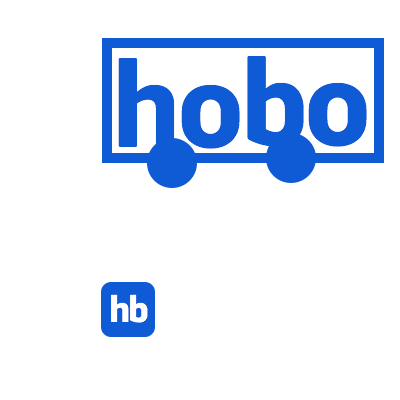
<style>
.page{position:relative;width:400px;height:400px;background:#ffffff}
.page>*{position:absolute;margin:0}
.t1{font:120px "Webnar-Bold";color:#0f5ad5}
.t2{font:36.1px "Webnar-Bold";color:#ffffff}
</style>
<div class="page">
<p class="t1" style="left:118px;top:58px;width:57px;height:89px">h</p>
<p class="t1" style="left:247px;top:56px;width:57px;height:91px">b</p>
<p class="t1" style="left:181px;top:84px;width:59px;height:65px">o</p>
<p class="t1" style="left:308px;top:82px;width:59px;height:65px">o</p>
<p class="t2" style="left:111px;top:294px;width:37px;height:29px">hb</p>
</div>
